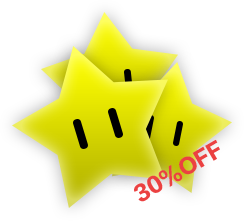
<style>
.page{position:relative;width:244px;height:221px;background:#ffffff}
.page>*{position:absolute;margin:0}
.t1{font:20px "FZLTTHK--GBK1-0";color:#eb4141}
</style>
<div class="page">
<p class="t1" style="left:134px;top:139px;width:86px;height:63px;rotate:-30deg">30%OFF</p>
</div>
